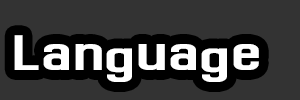
<style>
.page{position:relative;width:300px;height:100px;background:#333333}
.page>*{position:absolute;margin:0}
.t1{font:72px "Dhurjati";color:#ffffff}
</style>
<div class="page">
<p class="t1" style="left:14px;top:35px;width:245px;height:47px">Language</p>
</div>
